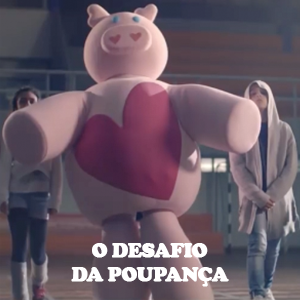
<style>
.page{position:relative;width:300px;height:300px}
.page>*{position:absolute;margin:0}
.t1{font:20px "CooperBlack";letter-spacing:-0.033em;color:#ffffff;font-weight:bold}
</style>
<div class="page">
<p class="t1" style="left:71px;top:243px;width:158px;height:44px;text-align:center">O DESAFIO<br>DA POUPANÇA</p>
</div>
